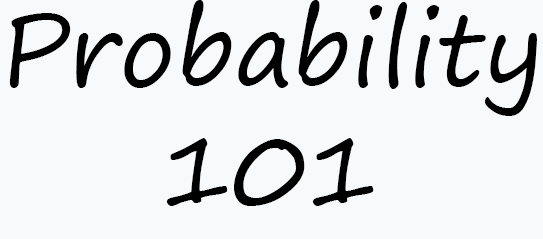
<style>
.page{position:relative;width:543px;height:239px;background:#f8f9fb}
.page>*{position:absolute;margin:0}
.t1{font:100px "SegoePrint";color:#000000}
</style>
<div class="page">
<p class="t1" style="left:9px;top:0px;width:528px;height:206px">Probability <br>    101</p>
</div>
